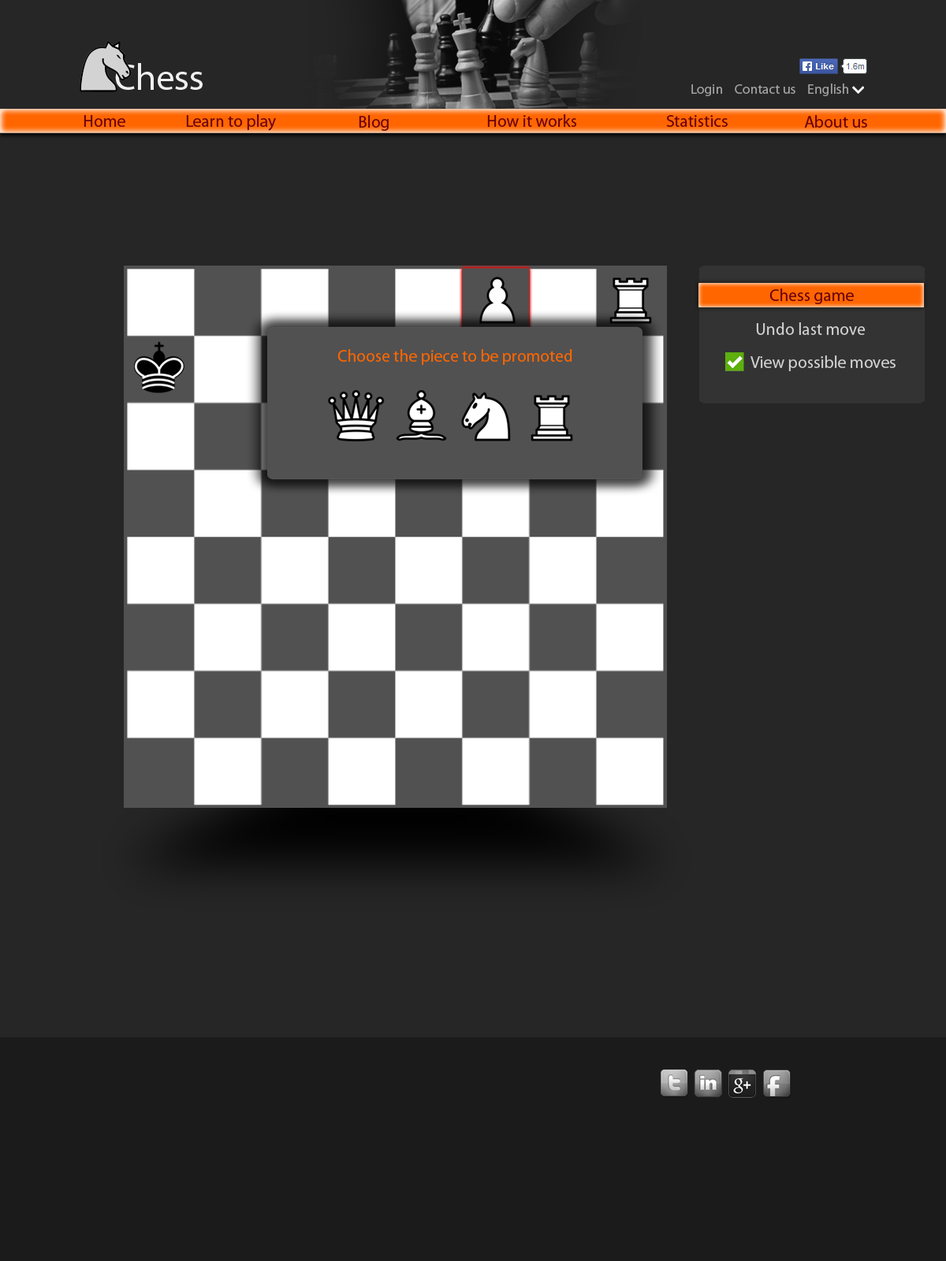
<style>
.page{position:relative;width:946px;height:1261px;background:#262626}
.page>*{position:absolute;margin:0}
.t1{font:36.8px "MyriadPro-Regular";color:#efefef}
.t2{font:13.8px "MyriadPro-Regular";color:#a2a2a2}
.t3{font:16.9px "MyriadPro-Regular";color:#69000a}
.t4{font:16.9px "MyriadPro-Regular";color:#d3d3d3}
.t5{font:16.9px "MyriadPro-Regular";color:#ff6600}
</style>
<div class="page">
<p class="t1" style="left:115px;top:63px;width:88px;height:27px">Chess</p>
<p class="t2" style="left:691px;top:84px;width:157px;height:12px">Login    Contact us    English</p>
<p class="t3" style="left:84px;top:115px;width:41px;height:12px">Home</p>
<p class="t3" style="left:186px;top:114px;width:90px;height:17px">Learn to play</p>
<p class="t3" style="left:359px;top:115px;width:30px;height:16px">Blog</p>
<p class="t3" style="left:487px;top:114px;width:90px;height:13px">How it works</p>
<p class="t3" style="left:666px;top:115px;width:61px;height:12px">Statistics</p>
<p class="t3" style="left:804px;top:115px;width:63px;height:13px">About us</p>
<p class="t3" style="left:769px;top:288px;width:84px;height:16px">Chess game</p>
<p class="t4" style="left:756px;top:322px;width:109px;height:13px">Undo last move</p>
<p class="t5" style="left:337px;top:349px;width:235px;height:16px">Choose the piece to be promoted</p>
<p class="t4" style="left:750px;top:355px;width:145px;height:16px">View possible moves</p>
</div>
